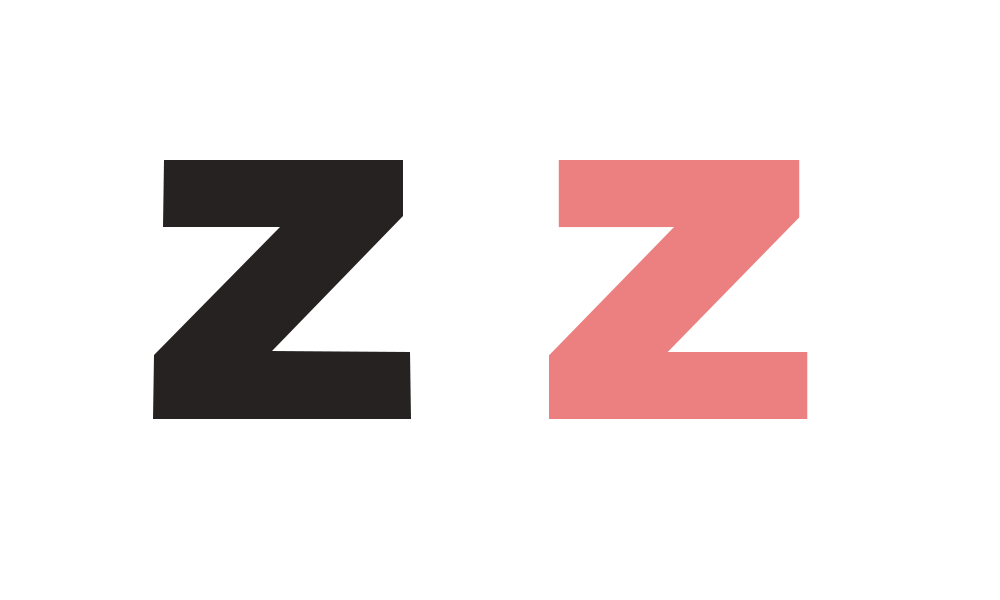
<style>
.page{position:relative;width:1000px;height:600px;background:#ffffff}
.page>*{position:absolute;margin:0}
.t1{font:500px "Arial-Black";color:#ec7f7f}
</style>
<div class="page">
<p class="t1" style="left:549px;top:160px;width:259px;height:259px">z</p>
</div>
